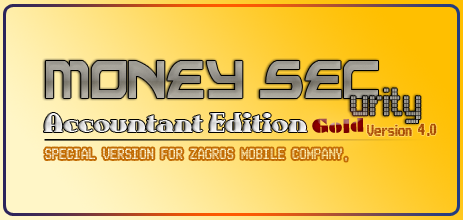
<style>
.page{position:relative;width:463px;height:220px}
.page>*{position:absolute;margin:0}
.t1{font:98.5px "Alexis";color:#9c9990;scale:0.61 1}
.t2{font:59.1px "Arcade";color:#99958d;scale:0.61 1}
.t3{font:30px "AuntBertha"}
.t4{font:18px "Braggadocio";color:#830000}
.t5{font:24px "Arcade";color:#a64800;scale:0.61 1}
.t6{font:23px "Arcade";scale:0.61 1}
</style>
<div class="page">
<p class="t1" style="left:46px;top:61px;width:332px;height:37px">Money Sec</p>
<p class="t2" style="left:351px;top:88px;width:70px;height:35px">urity</p>
<p class="t3" style="left:44px;top:113px;width:263px;height:19px">Accountant Edition</p>
<p class="t4" style="left:312px;top:118px;width:52px;height:15px;rotate:-1deg">Gold</p>
<p class="t5" style="left:367px;top:124px;width:45px;height:12px">Version</p>
<p class="t5" style="left:418px;top:120px;width:19px;height:20px">4.0</p>
<p class="t6" style="left:45px;top:148px;width:302px;height:13px">SPECIAL VERSION FOR ZAGROS MOBILE COMPANY.</p>
</div>
